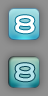
<style>
.page{position:relative;width:48px;height:96px}
.page>*{position:absolute;margin:0}
.t1{font:24px "DFMaruMoji-W9-WING-RKSJ-H";color:#ffffff;font-weight:bold}
.t2{font:24px "DFMaruMoji-W9-WING-RKSJ-H";color:#b5e3e9;font-weight:bold}
</style>
<div class="page">
<p class="t1" style="left:15px;top:15px;width:20px;height:19px">8</p>
<p class="t2" style="left:15px;top:63px;width:20px;height:19px">8</p>
</div>
